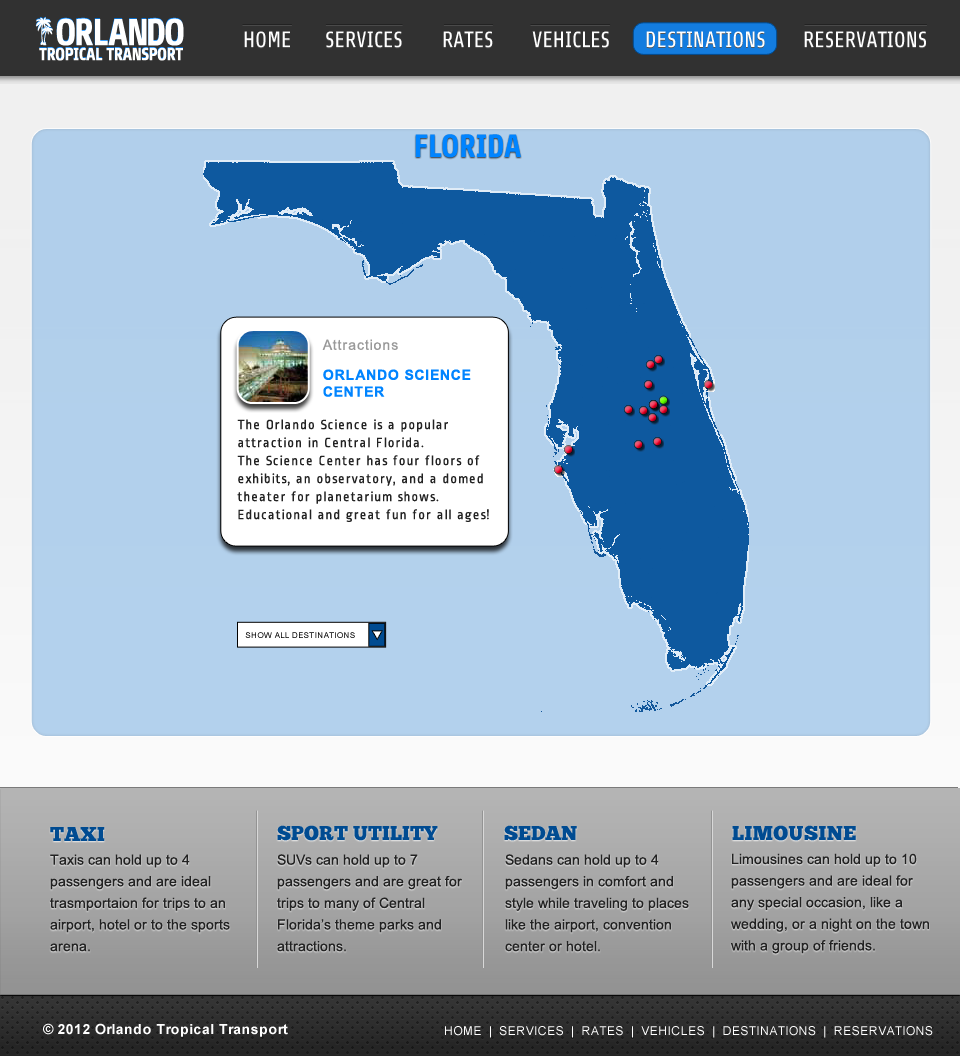
<style>
.page{position:relative;width:960px;height:1056px}
.page>*{position:absolute;margin:0}
.t1{font:22px "Share-Regular";color:#ffffff}
.t2{font:22px "Share-Regular"}
.t3{font:32px "Share-Bold";color:#0084ff}
.t4{font:14px "ArialMT";letter-spacing:0.06em;color:#999999}
.t5{font:14px "Arial-BoldMT";letter-spacing:0.06em;color:#0084ff;text-transform:uppercase}
.t6{font:14px/18px "RopaSans-Regular";letter-spacing:0.06em;color:#222222}
.t7{font:8px "ArialMT";letter-spacing:0.06em}
.t8{font:20px "ChunkFive-Roman";color:#004b91}
.t9{font:20px "ChunkFive-Roman";letter-spacing:0.02em;color:#004b91;text-transform:uppercase}
.t10{font:14px/21.6px "ArialMT";color:#222222}
.t11{font:14px "Arial-BoldMT";letter-spacing:0.02em;color:#ffffff}
.t12{font:14px "Arial-BoldMT";letter-spacing:0.02em;color:#ffffff;text-transform:uppercase}
.t13{font:12px "ArialMT";letter-spacing:0.04em;color:#ffffff;text-transform:uppercase}
</style>
<div class="page">
<p class="t1" style="left:244px;top:32px;width:46px;height:17px">HOME</p>
<p class="t1" style="left:244px;top:31px;width:46px;height:17px">HOME</p>
<p class="t2" style="left:326px;top:32px;width:76px;height:17px">SERVICES</p>
<p class="t1" style="left:326px;top:31px;width:76px;height:17px">SERVICES</p>
<p class="t2" style="left:443px;top:32px;width:50px;height:17px">RATES</p>
<p class="t1" style="left:443px;top:31px;width:50px;height:17px">RATES</p>
<p class="t2" style="left:532px;top:32px;width:77px;height:17px">VEHICLES</p>
<p class="t1" style="left:532px;top:31px;width:77px;height:17px">VEHICLES</p>
<p class="t2" style="left:646px;top:32px;width:119px;height:17px">DESTINATIONS</p>
<p class="t1" style="left:646px;top:31px;width:119px;height:17px">DESTINATIONS</p>
<p class="t2" style="left:804px;top:32px;width:122px;height:17px">RESERVATIONS</p>
<p class="t1" style="left:804px;top:31px;width:122px;height:17px">RESERVATIONS</p>
<p class="t3" style="left:415px;top:134px;width:106px;height:24px">FLORIDA</p>
<p class="t4" style="left:322px;top:339px;width:76px;height:11px">Attractions</p>
<p class="t5" style="left:323px;top:369px;width:148px;height:28px">orlando science<br>center</p>
<p class="t6" style="left:237px;top:419px;width:252px;height:103px">The Orlando Science is a popular<br>attraction in Central Florida. <br>The Science Center has four floors of <br>exhibits, an observatory, and a domed<br>theater for planetarium shows. <br>Educational and great fun for all ages!</p>
<p class="t7" style="left:245px;top:632px;width:110px;height:6px">SHOW ALL DESTINATIONS</p>
<p class="t8" style="left:50px;top:827px;width:55px;height:14px">TAXI</p>
<p class="t8" style="left:277px;top:825px;width:161px;height:16px">SPORT UTILITY</p>
<p class="t8" style="left:504px;top:825px;width:73px;height:16px">SEDAN</p>
<p class="t9" style="left:732px;top:825px;width:124px;height:16px">LIMOUSINE</p>
<p class="t10" style="left:50px;top:854px;width:180px;height:98px">Taxis can hold up to 4 passengers and are ideal trasmportaion for trips to an airport, hotel or to the sports arena.</p>
<p class="t10" style="left:277px;top:854px;width:185px;height:98px">SUVs can hold up to 7 passengers and are great for trips to many of Central Florida’s theme parks and  attractions.</p>
<p class="t10" style="left:505px;top:854px;width:184px;height:98px">Sedans can hold up to 4 passengers in comfort and style while traveling to places like the airport, convention center or hotel.</p>
<p class="t10" style="left:731px;top:853px;width:198px;height:101px">Limousines can hold up to 10 passengers and are ideal for any special occasion, like a wedding, or a night on the town with a group of friends.</p>
<p class="t11" style="left:43px;top:1023px;width:245px;height:14px"><span class="t12">© 2012 O</span>rlando Tropical Transport</p>
<p class="t13" style="left:445px;top:1026px;width:488px;height:12px">HOME  |  SERVICES  |  RATES  |  VEHICLES  |  DESTINATIONS  |  RESERVATIONS</p>
</div>
